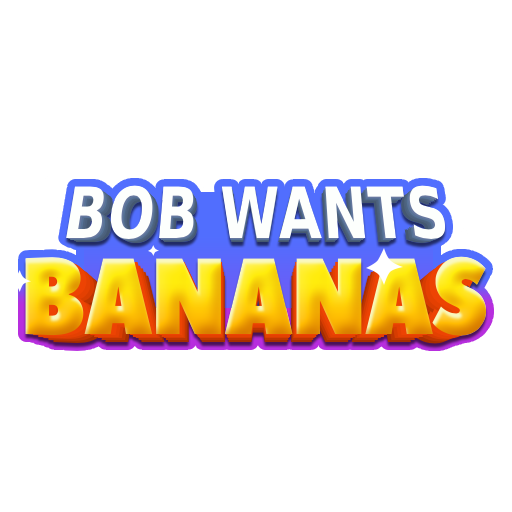
<style>
.page{position:relative;width:512px;height:512px;background:#ffffff}
.page>*{position:absolute;margin:0}
.t1{font:70.4px "AsketCondensed-ExtraBold";letter-spacing:0.025em;color:#fdfffd;scale:0.77 1}
.t2{font:69.7px "AsketCondensed-ExtraBold";letter-spacing:0.025em;color:#fdfffd;scale:0.77 1}
.t3{font:69px "AsketCondensed-ExtraBold";letter-spacing:0.025em;color:#fdfffd;scale:0.77 1}
.t4{font:68.3px "AsketCondensed-ExtraBold";letter-spacing:0.025em;color:#fdfffd;scale:0.77 1}
.t5{font:67.6px "AsketCondensed-ExtraBold";letter-spacing:0.025em;scale:0.77 1}
.t6{font:108px "PeaceSans";letter-spacing:-0.025em;scale:0.83 1}
.t7{font:104.4px "PeaceSans";letter-spacing:-0.025em;scale:0.83 1}
.t8{font:102px "PeaceSans";letter-spacing:-0.025em;scale:0.83 1}
.t9{font:99.6px "PeaceSans";letter-spacing:-0.025em;scale:0.83 1}
.t10{font:97.2px "PeaceSans";letter-spacing:-0.025em;scale:0.83 1}
.t11{font:94.8px "PeaceSans";letter-spacing:-0.025em;scale:0.83 1}
</style>
<div class="page">
<p class="t1" style="left:66px;top:185px;width:380px;height:54px">BOB WANTS</p>
<p class="t1" style="left:66px;top:185px;width:380px;height:54px">BOB WANTS</p>
<p class="t2" style="left:68px;top:187px;width:376px;height:53px">BOB WANTS</p>
<p class="t2" style="left:68px;top:187px;width:376px;height:53px">BOB WANTS</p>
<p class="t3" style="left:70px;top:188px;width:372px;height:53px">BOB WANTS</p>
<p class="t3" style="left:70px;top:188px;width:372px;height:53px">BOB WANTS</p>
<p class="t4" style="left:72px;top:189px;width:368px;height:52px">BOB WANTS</p>
<p class="t4" style="left:72px;top:189px;width:368px;height:52px">BOB WANTS</p>
<p class="t5" style="left:73px;top:190px;width:365px;height:52px">BOB WANTS</p>
<p class="t5" style="left:73px;top:190px;width:365px;height:52px">BOB WANTS</p>
<p class="t6" style="left:25px;top:256px;width:461px;height:80px">BANANAS</p>
<p class="t6" style="left:25px;top:256px;width:461px;height:80px">BANANAS</p>
<p class="t7" style="left:33px;top:260px;width:446px;height:77px">BANANAS</p>
<p class="t7" style="left:33px;top:260px;width:446px;height:77px">BANANAS</p>
<p class="t8" style="left:38px;top:264px;width:436px;height:75px">BANANAS</p>
<p class="t8" style="left:38px;top:264px;width:436px;height:75px">BANANAS</p>
<p class="t9" style="left:43px;top:266px;width:425px;height:74px">BANANAS</p>
<p class="t9" style="left:43px;top:266px;width:425px;height:74px">BANANAS</p>
<p class="t10" style="left:48px;top:270px;width:415px;height:72px">BANANAS</p>
<p class="t10" style="left:48px;top:270px;width:415px;height:72px">BANANAS</p>
<p class="t11" style="left:53px;top:274px;width:405px;height:70px">BANANAS</p>
<p class="t11" style="left:53px;top:274px;width:405px;height:70px">BANANAS</p>
</div>
